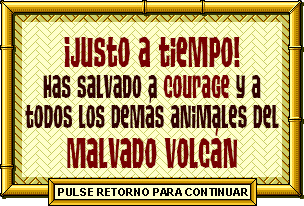
<style>
.page{position:relative;width:304px;height:206px;background:#ffffcc}
.page>*{position:absolute;margin:0}
.t1{font:32.7px/30.6px "TikiIsland";color:#330000;scale:0.7 1}
.t2{font:43px/30.6px "TikiIsland";color:#770000;scale:0.7 1}
.t3{font:32.7px/30.6px "TikiIsland";color:#770000;scale:0.7 1}
.t4{font:42px/40px "TikiIsland";color:#770000;scale:0.7 1}
</style>
<div class="page">
<p class="t1" style="left:25px;top:37px;width:254px;height:131px;text-align:center"><span class="t2">¡Justo a tiempo!<br></span>Has salvado a <span class="t3">courage</span> y a<br>todos los demás animales del<br><span class="t4">malvado volcán</span></p>
</div>
